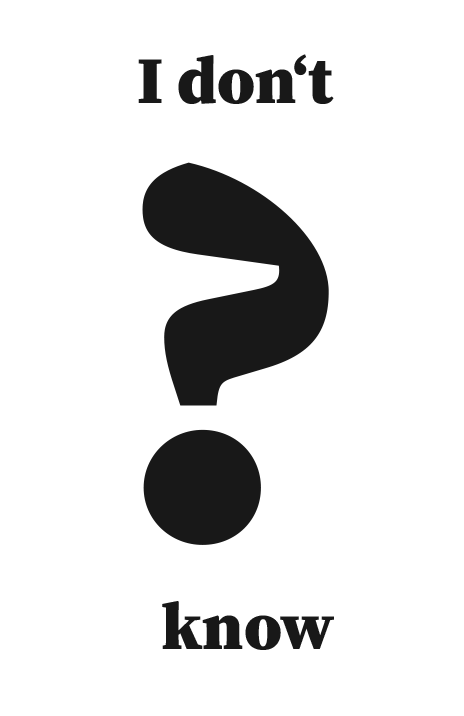
<style>
.page{position:relative;width:464px;height:716px;background:#ffffff}
.page>*{position:absolute;margin:0}
.t1{font:66.7px "SourceSerifRoman-Black";color:#181818}
.t2{font:555.6px "SourceSerifRoman-Black";color:#181818}
</style>
<div class="page">
<p class="t1" style="left:138px;top:54px;width:196px;height:50px">I don‘t</p>
<p class="t2" style="left:142px;top:162px;width:187px;height:383px">?</p>
<p class="t1" style="left:162px;top:601px;width:172px;height:49px">know</p>
</div>
